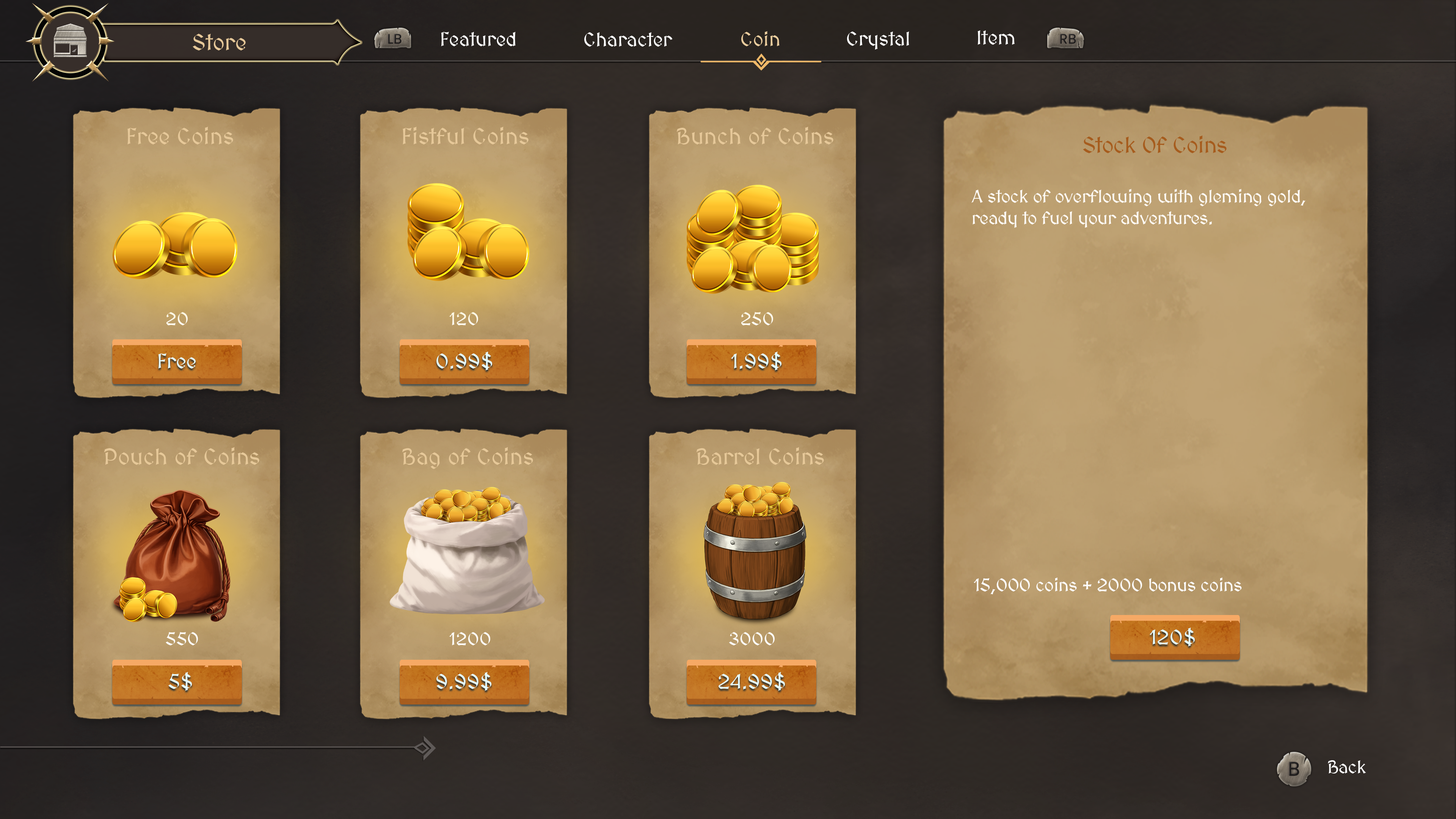
<style>
.page{position:relative;width:1456px;height:819px}
.page>*{position:absolute;margin:0}
.t1{font:22.7px "MedievalSharp";color:#e6c899}
.t2{font:19.8px "MedievalSharp";color:#ffffff}
.t3{font:19.8px "MedievalSharp";color:#ebcd9e}
.t4{font:22.7px "MedievalSharp";letter-spacing:-0.02em;color:#a65c1d}
.t5{font:18.2px "MedievalSharp";letter-spacing:-0.02em;color:#fffbf5}
.t6{font:18.2px "MedievalSharp";color:#ffffff}
.t7{font:20.5px "MedievalSharp";color:#e5fbfd}
.t8{font:18.2px "MedievalSharp";letter-spacing:-0.02em;color:#ffffff}
</style>
<div class="page">
<p class="t1" style="left:193px;top:34px;width:53px;height:16px">Store</p>
<p class="t2" style="left:441px;top:32px;width:75px;height:14px">Featured</p>
<p class="t2" style="left:584px;top:32px;width:89px;height:15px">Character</p>
<p class="t3" style="left:741px;top:31px;width:39px;height:15px">Coin</p>
<p class="t2" style="left:847px;top:31px;width:62px;height:19px">Crystal</p>
<p class="t2" style="left:977px;top:30px;width:38px;height:15px">Item</p>
<p class="t1" style="left:127px;top:127px;width:106px;height:17px">Free Coins</p>
<p class="t1" style="left:403px;top:127px;width:126px;height:17px">Fistful Coins</p>
<p class="t1" style="left:676px;top:127px;width:157px;height:17px">Bunch of Coins</p>
<p class="t4" style="left:1083px;top:135px;width:144px;height:18px">Stock Of Coins</p>
<p class="t5" style="left:971px;top:189px;width:334px;height:39px">A stock of overflowing with gleming gold, ready to fuel your adventures.</p>
<p class="t6" style="left:166px;top:312px;width:22px;height:13px">20</p>
<p class="t6" style="left:449px;top:312px;width:29px;height:13px">120</p>
<p class="t6" style="left:741px;top:312px;width:32px;height:13px">250</p>
<p class="t7" style="left:158px;top:353px;width:38px;height:16px">Free</p>
<p class="t7" style="left:436px;top:351px;width:56px;height:19px">0.99$</p>
<p class="t7" style="left:731px;top:351px;width:50px;height:19px">1.99$</p>
<p class="t1" style="left:104px;top:447px;width:155px;height:18px">Pouch of Coins</p>
<p class="t1" style="left:402px;top:447px;width:131px;height:22px">Bag of Coins</p>
<p class="t1" style="left:696px;top:447px;width:128px;height:18px">Barrel Coins</p>
<p class="t8" style="left:973px;top:577px;width:269px;height:18px">15,000 coins + 2000 bonus coins</p>
<p class="t7" style="left:1149px;top:628px;width:46px;height:18px">120$</p>
<p class="t6" style="left:166px;top:632px;width:32px;height:13px">550</p>
<p class="t6" style="left:449px;top:632px;width:41px;height:13px">1200</p>
<p class="t6" style="left:729px;top:632px;width:46px;height:13px">3000</p>
<p class="t7" style="left:168px;top:672px;width:24px;height:19px">5$</p>
<p class="t7" style="left:436px;top:672px;width:55px;height:19px">9.99$</p>
<p class="t7" style="left:719px;top:672px;width:66px;height:19px">24.99$</p>
<p class="t8" style="left:1328px;top:760px;width:38px;height:13px">Back</p>
</div>
